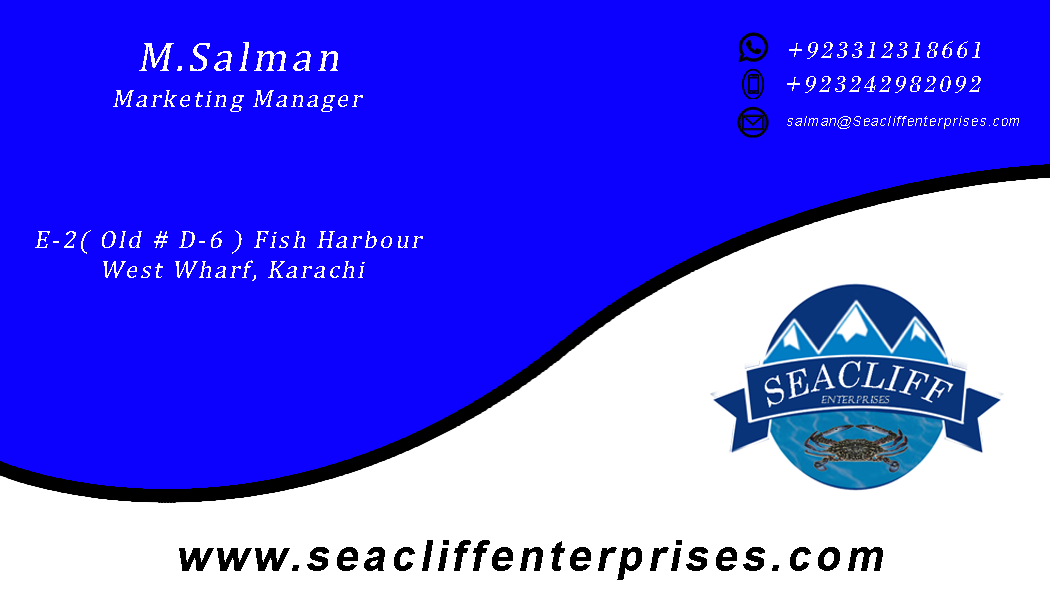
<style>
.page{position:relative;width:1050px;height:600px;background:#0c00ff}
.page>*{position:absolute;margin:0}
.t1{font:25.4px "BodoniMT";letter-spacing:0.1em;color:#fffdfd;font-style:italic}
.t2{font:41.7px "CambriaMath";letter-spacing:0.1em;color:#fffdfd;font-style:italic}
.t3{font:25px "CambriaMath";letter-spacing:0.1em;color:#fffdfd;font-style:italic}
.t4{font:13.5px "ArialMT";letter-spacing:0.1em;color:#ffffff;font-style:italic}
.t5{font:43.2px "Arial-BoldMT";letter-spacing:0.1em;color:#000000;font-style:italic}
</style>
<div class="page">
<p class="t1" style="left:789px;top:41px;width:191px;height:18px">+923312318661</p>
<p class="t2" style="left:139px;top:42px;width:199px;height:29px">M.Salman</p>
<p class="t1" style="left:787px;top:76px;width:194px;height:17px">+923242982092</p>
<p class="t3" style="left:113px;top:90px;width:250px;height:22px">Marketing Manager</p>
<p class="t4" style="left:787px;top:116px;width:232px;height:13px">salman@Seacliffenterprises.com</p>
<p class="t3" style="left:35px;top:230px;width:388px;height:51px;text-align:center">E-2( Old # D-6 ) Fish Harbour <br>West Wharf, Karachi</p>
<p class="t5" style="left:179px;top:540px;width:704px;height:40px">www.seacliffenterprises.com</p>
</div>
